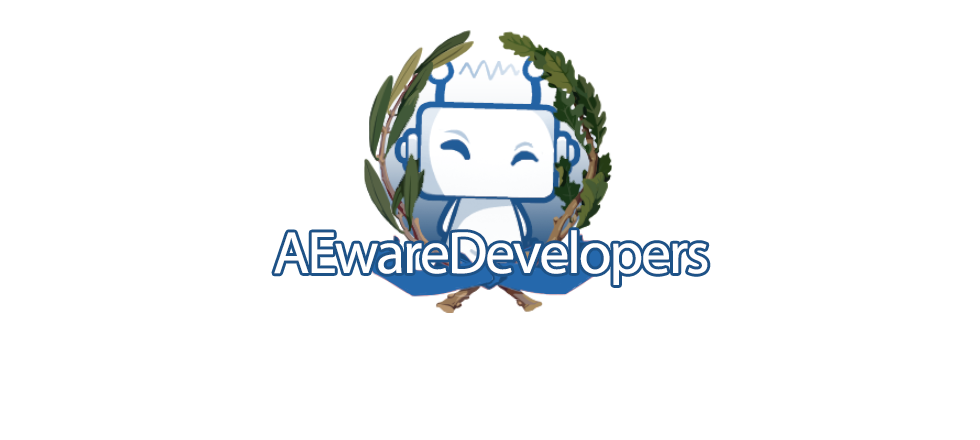
<style>
.page{position:relative;width:980px;height:440px;background:#ffffff}
.page>*{position:absolute;margin:0}
.t1{font:60px "MyriadPro-Regular";letter-spacing:-0.04em;color:#ffffff}
</style>
<div class="page">
<p class="t1" style="left:274px;top:230px;width:434px;height:55px">AEwareDevelopers</p>
</div>
